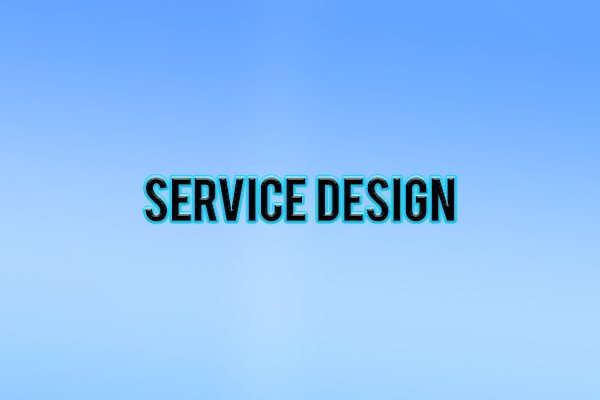
<style>
.page{position:relative;width:600px;height:400px}
.page>*{position:absolute;margin:0}
.t1{font:48px "Bebas";color:#000000;text-transform:uppercase}
</style>
<div class="page">
<p class="t1" style="left:145px;top:177px;width:310px;height:45px">service  design</p>
</div>
